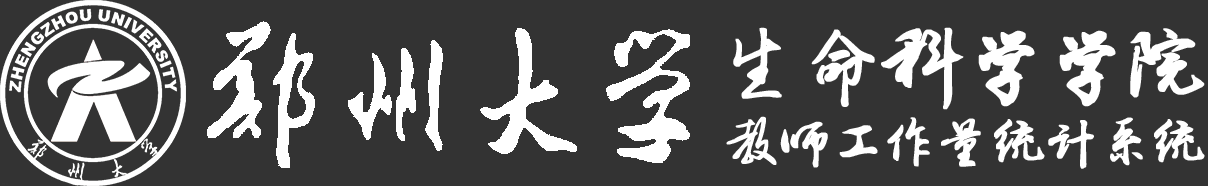
<style>
.page{position:relative;width:1208px;height:186px;background:#333333}
.page>*{position:absolute;margin:0}
.t1{font:79.3px "Li-Xuke";color:#ffffff;font-weight:bold}
.t2{font:51px "Li-Xuke";color:#ffffff;font-weight:bold}
</style>
<div class="page">
<p class="t1" style="left:733px;top:27px;width:472px;height:83px">生命科学学院</p>
<p class="t2" style="left:726px;top:116px;width:479px;height:53px">教师工作量统计系统</p>
</div>
